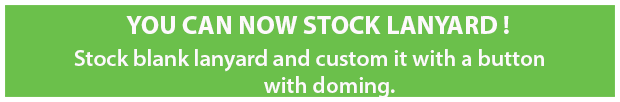
<style>
.page{position:relative;width:620px;height:102px;background:#6bc04b}
.page>*{position:absolute;margin:0}
.t1{font:26px "MyriadPro-Bold";color:#fdf9fb}
.t2{font:23px "MyriadPro-Semibold";color:#fdf9fb}
.t3{font:20.4px "MyriadPro-Bold";color:#060103}
</style>
<div class="page">
<p class="t1" style="left:126px;top:16px;width:383px;height:18px">YOU CAN NOW STOCK LANYARD !</p>
<p class="t2" style="left:74px;top:49px;width:470px;height:49px"><span class="t3">       <br></span>Stock blank lanyard and custom it with a button <br>                                        with doming.</p>
</div>
